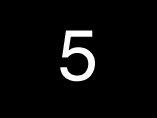
<style>
.page{position:relative;width:157px;height:118px;background:#000000}
.page>*{position:absolute;margin:0}
.t1{font:72px "Helvetica";color:#ffffff}
</style>
<div class="page">
<p class="t1" style="left:60px;top:30px;width:35px;height:52px">5</p>
</div>
